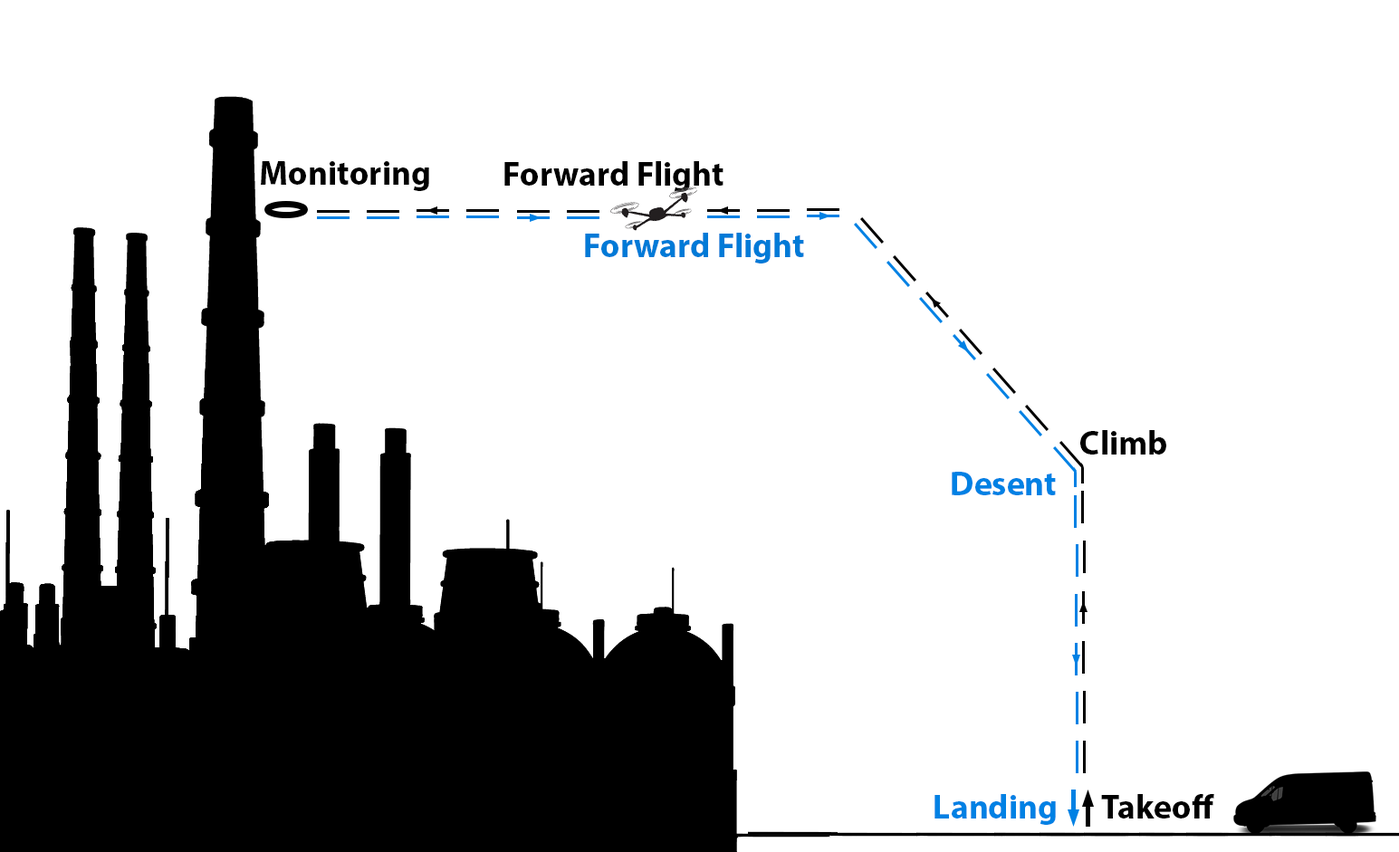
<style>
.page{position:relative;width:1399px;height:852px;background:#ffffff}
.page>*{position:absolute;margin:0}
.t1{font:34px "MyriadPro-Bold";color:#000000}
.t2{font:34px "MyriadPro-Bold";color:#007ad7}
.t3{font:34px "MyriadPro-Bold";color:#0081e4}
</style>
<div class="page">
<p class="t1" style="left:261px;top:161px;width:168px;height:30px">Monitoring</p>
<p class="t1" style="left:504px;top:161px;width:220px;height:31px">Forward Flight</p>
<p class="t2" style="left:585px;top:233px;width:219px;height:31px">Forward Flight</p>
<p class="t1" style="left:1080px;top:430px;width:86px;height:25px">Climb</p>
<p class="t3" style="left:952px;top:472px;width:104px;height:23px">Desent</p>
<p class="t3" style="left:935px;top:794px;width:121px;height:31px">Landing</p>
<p class="t1" style="left:1101px;top:794px;width:113px;height:25px">Takeoff</p>
</div>
